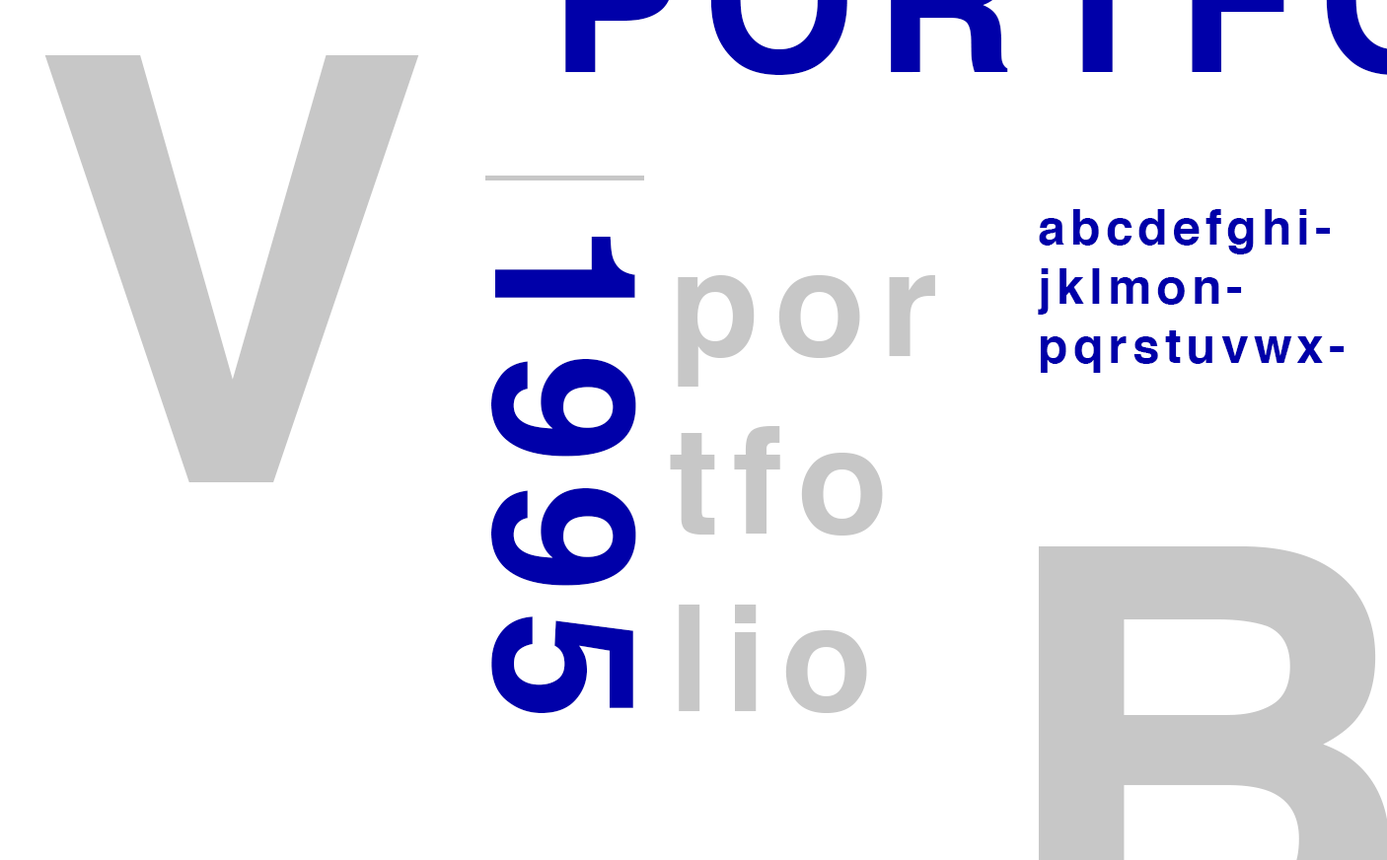
<style>
.page{position:relative;width:1387px;height:860px;background:#ffffff}
.page>*{position:absolute;margin:0}
.t1{font:591.7px "Helvetica-Bold";letter-spacing:0.1em;color:#c7c7c7}
.t2{font:49.3px "Helvetica-Bold";letter-spacing:0.1em;color:#0000a9}
.t3{font:197.2px "Helvetica-Bold";letter-spacing:0.1em;color:#0000a9}
.t4{font:147.9px "Helvetica-Bold";letter-spacing:0.1em;color:#c7c7c7}
</style>
<div class="page">
<p class="t1" style="left:44px;top:55px;width:375px;height:427px">V</p>
<p class="t2" style="left:1037px;top:209px;width:307px;height:164px;text-align:right">abcdefghijklmonpqrstuvwxyzæøå</p>
<p class="t3" style="left:491px;top:237px;width:145px;height:476px;rotate:90deg">1995</p>
<p class="t4" style="left:670px;top:275px;width:265px;height:438px;text-align:right">por<br>tfo<br>lio</p>
</div>
